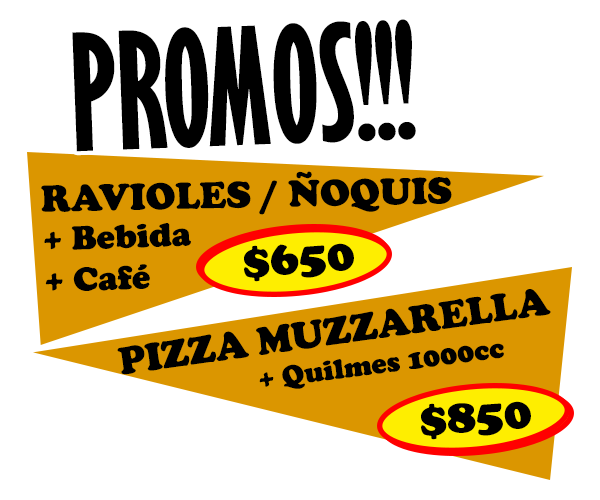
<style>
.page{position:relative;width:600px;height:500px;background:#ffffff}
.page>*{position:absolute;margin:0}
.t1{font:149px "GillSansMT-ExtraCondensedBold";color:#000000}
.t2{font:38.5px "CooperBlack";color:#000000}
.t3{font:34.5px "CooperBlack";color:#000000}
.t4{font:46.8px "CooperBlack";color:#000000}
.t5{font:40.1px "CooperBlack";color:#000000}
.t6{font:28.5px "CooperBlack";color:#000000}
</style>
<div class="page">
<p class="t1" style="left:72px;top:19px;width:344px;height:133px;rotate:-2deg">PROMOS!!!</p>
<p class="t2" style="left:41px;top:171px;width:411px;height:44px;rotate:-1deg">RAVIOLES / ÑOQUIS</p>
<p class="t3" style="left:44px;top:223px;width:147px;height:68px;text-align:right;rotate:-2deg">+ Bebida<br>+ Café</p>
<p class="t4" style="left:244px;top:243px;width:110px;height:39px;rotate:-4deg">$650</p>
<p class="t5" style="left:117px;top:289px;width:434px;height:86px;rotate:-8deg">PIZZA MUZZARELLA</p>
<p class="t6" style="left:259px;top:343px;width:245px;height:46px;rotate:-7deg">+ Quilmes 1000cc</p>
<p class="t4" style="left:421px;top:401px;width:110px;height:39px;rotate:-4deg">$850</p>
</div>
